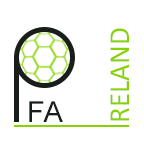
<style>
.page{position:relative;width:144px;height:144px;background:#ffffff}
.page>*{position:absolute;margin:0}
.t1{font:29.2px "Calibri";color:#87d200}
.t2{font:29.1px "ArialMT";color:#1a1e1a}
</style>
<div class="page">
<p class="t1" style="left:110px;top:28px;width:19px;height:93px;rotate:-90deg">RELAND</p>
<p class="t2" style="left:29px;top:101px;width:34px;height:21px">FA</p>
</div>
